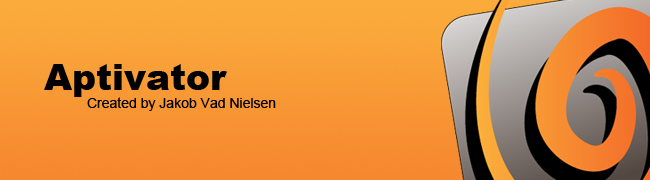
<style>
.page{position:relative;width:650px;height:180px}
.page>*{position:absolute;margin:0}
.t1{font:36px "Arial-Black";color:#000000}
.t2{font:14px "ArialMT";color:#000000}
</style>
<div class="page">
<p class="t1" style="left:44px;top:64px;width:183px;height:33px">Aptivator</p>
<p class="t2" style="left:87px;top:97px;width:189px;height:14px">Created by Jakob Vad Nielsen</p>
</div>
